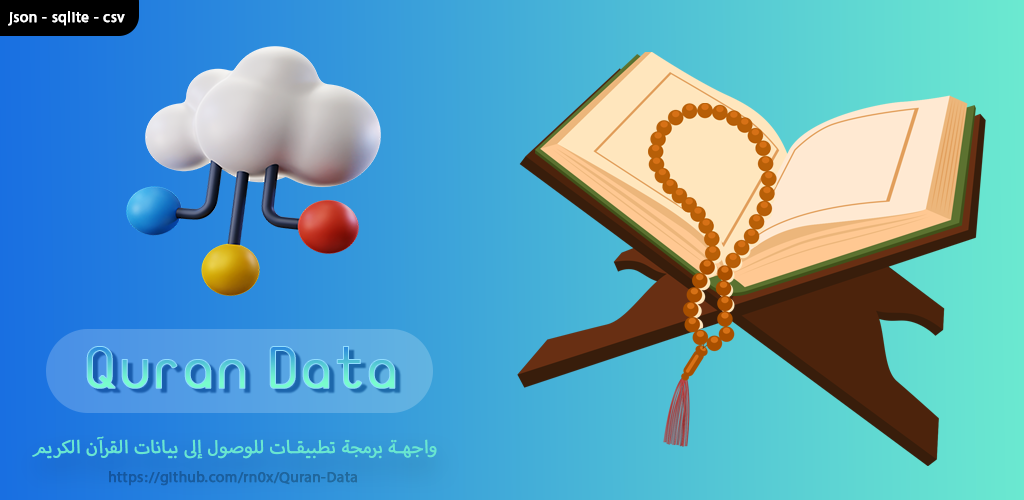
<style>
.page{position:relative;width:1024px;height:500px}
.page>*{position:absolute;margin:0}
.t1{font:20.8px "MyriadArabic-Regular";letter-spacing:0.01em;color:#ffffff;font-weight:bold}
.t2{font:58.3px "JFFlat-Regular";letter-spacing:0.01em;font-weight:bold}
.t3{font:25px "MyriadArabic-Regular";letter-spacing:0.01em;color:#69e6d0;font-weight:bold}
.t4{font:20.8px "MyriadArabic-Regular";letter-spacing:0.01em;color:#1b5f9e;font-weight:bold}
</style>
<div class="page">
<p class="t1" style="left:8px;top:11px;width:117px;height:15px">json - sqlite - csv</p>
<p class="t2" style="left:86px;top:346px;width:310px;height:43px">Quran Data</p>
<p class="t3" style="left:32px;top:436px;width:405px;height:23px">واجهة برمجة تطبيقات للوصول إلى بيانات القرآن الكريم</p>
<p class="t4" style="left:109px;top:471px;width:249px;height:15px">https://github.com/rn0x/Quran-Data</p>
</div>
